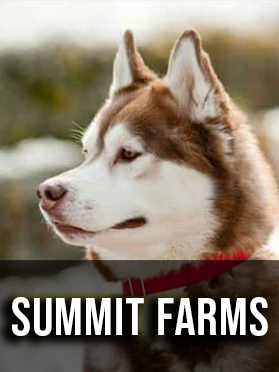
<style>
.page{position:relative;width:279px;height:372px}
.page>*{position:absolute;margin:0}
.t1{font:53px "BebasNeue-Regular";letter-spacing:0.025em;color:#ffffff}
</style>
<div class="page">
<p class="t1" style="left:12px;top:297px;width:256px;height:39px">Summit farms</p>
</div>
